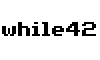
<style>
.page{position:relative;width:100px;height:60px;background:#ffffff}
.page>*{position:absolute;margin:0}
.t1{font:16.7px "BoldLEDBoard-7";color:#000000}
</style>
<div class="page">
<p class="t1" style="left:2px;top:22px;width:94px;height:14px">while42</p>
</div>
